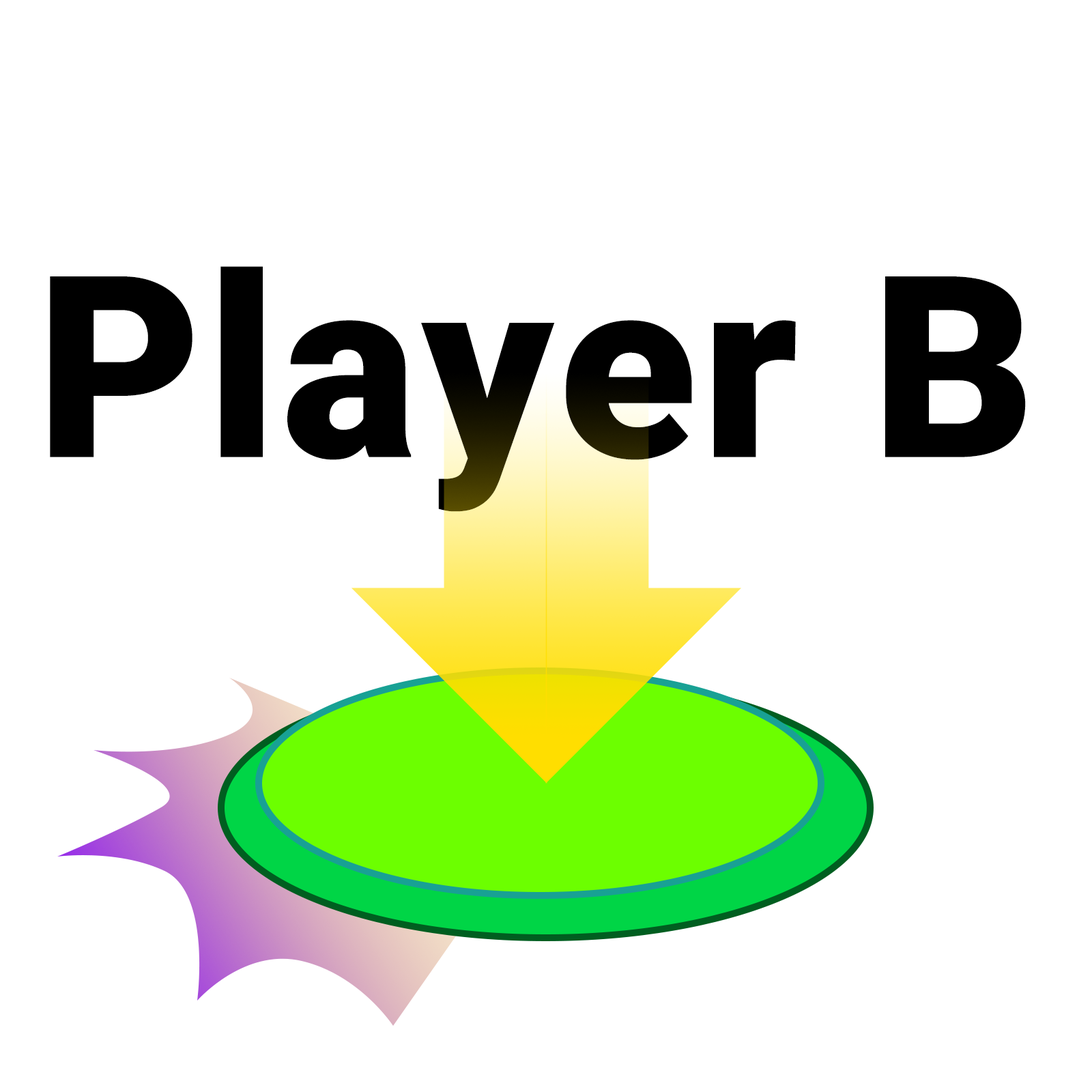
<style>
.page{position:relative;width:1092px;height:1092px;background:#ffffff}
.page>*{position:absolute;margin:0}
.t1{font:254.1px "Roboto-Black";letter-spacing:0.02em;color:#000000}
</style>
<div class="page">
<p class="t1" style="left:50px;top:266px;width:976px;height:246px">Player B</p>
</div>
